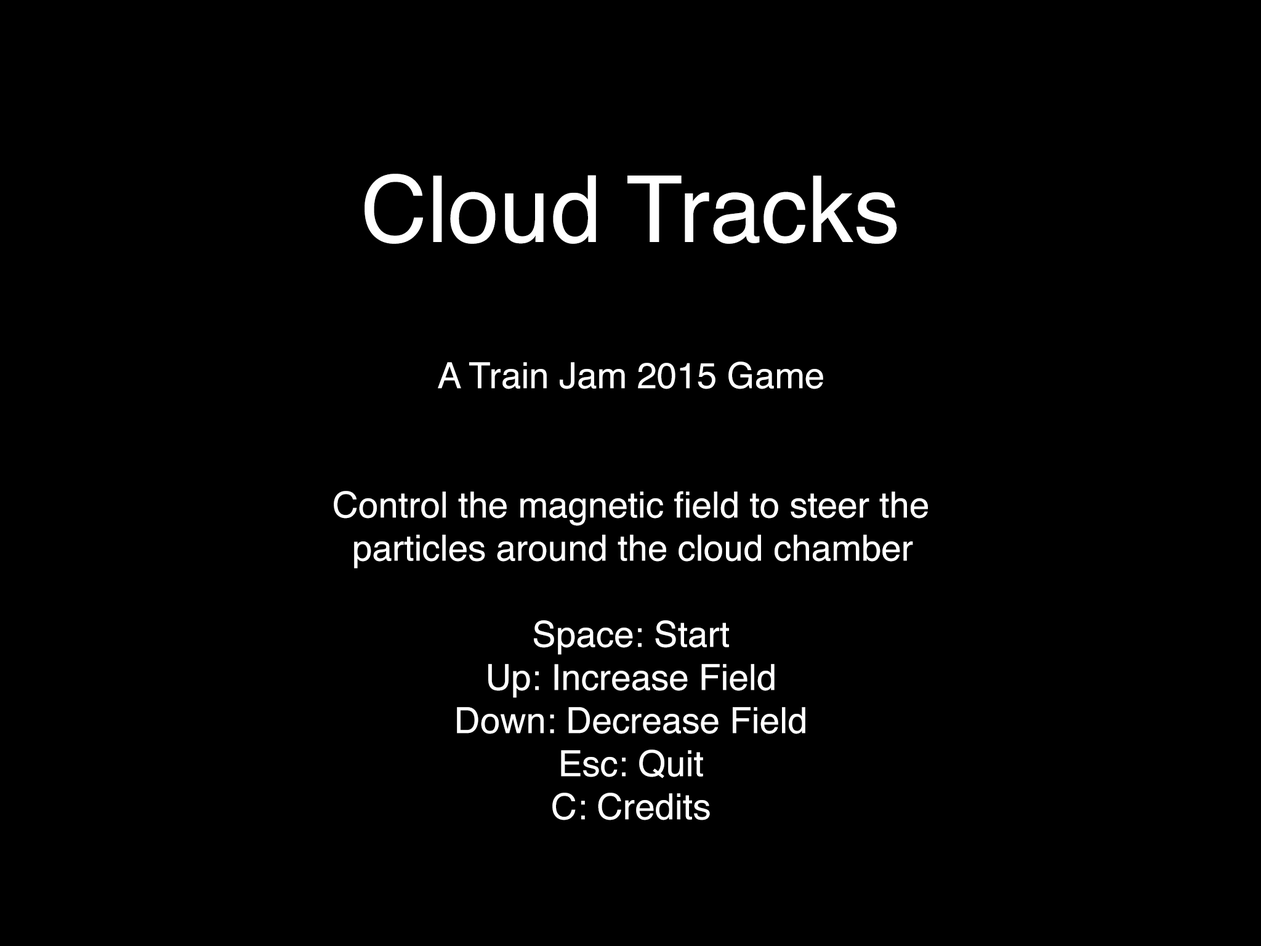
<style>
.page{position:relative;width:1261px;height:946px;background:#000000}
.page>*{position:absolute;margin:0}
.t1{font:92.4px "Helvetica";color:#ffffff}
.t2{font:35.9px "Helvetica";color:#ffffff}
</style>
<div class="page">
<p class="t1" style="left:364px;top:174px;width:533px;height:70px">Cloud Tracks</p>
<p class="t2" style="left:334px;top:361px;width:594px;height:459px;text-align:center">A Train Jam 2015 Game<br><br><br>Control the magnetic field to steer the<br>particles around the cloud chamber<br><br>Space: Start<br>Up: Increase Field<br>Down: Decrease Field<br>Esc: Quit<br>C: Credits</p>
</div>
